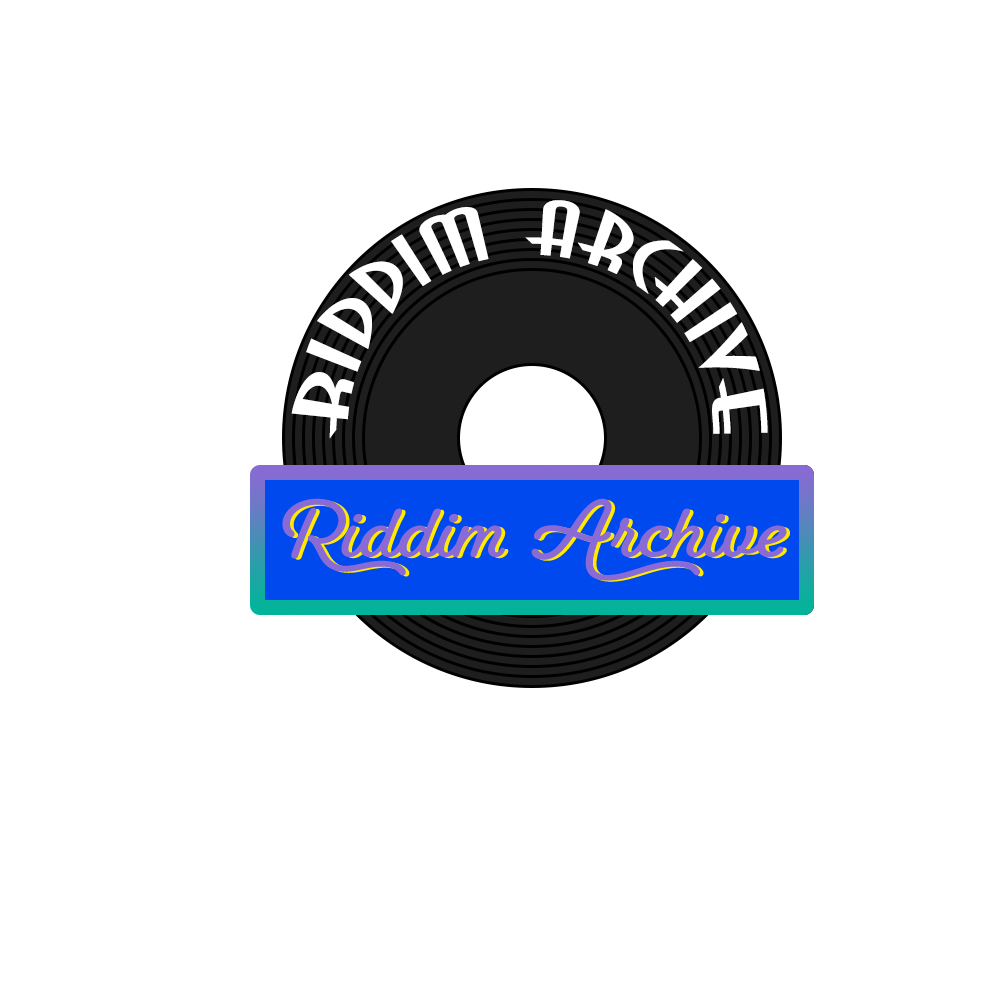
<style>
.page{position:relative;width:1000px;height:1000px;background:#ffffff}
.page>*{position:absolute;margin:0}
.t1{font:72.9px "Anastasia";color:#ffffff}
.t2{font:72.9px "FairwaterScript-Bold";color:#8a6ad4}
.t3{font:72.9px "FairwaterScript-Bold"}
</style>
<div class="page">
<p class="t1" style="left:291px;top:200px;width:477px;height:239px">Riddim Archive</p>
<p class="t2" style="left:282px;top:498px;width:505px;height:83px">Riddim Archive</p>
<p class="t3" style="left:286px;top:500px;width:504px;height:82px">Riddim Archive</p>
</div>
